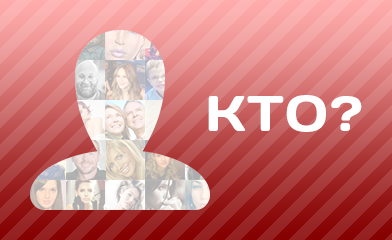
<style>
.page{position:relative;width:392px;height:240px}
.page>*{position:absolute;margin:0}
.t1{font:49.5px "Days";letter-spacing:0.05em;color:#ffffff}
</style>
<div class="page">
<p class="t1" style="left:208px;top:95px;width:154px;height:37px">КТО?</p>
</div>
